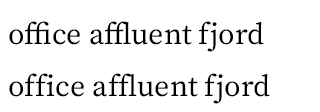
<style>
.page{position:relative;width:320px;height:112px;background:#ffffff}
.page>*{position:absolute;margin:0}
.t1{font:30px "SourceSerifRoman-Regular";color:#000000}
</style>
<div class="page">
<p class="t1" style="left:9px;top:21px;width:255px;height:31px">office affluent fjord</p>
<p class="t1" style="left:9px;top:73px;width:261px;height:31px">office affluent fjord</p>
</div>
